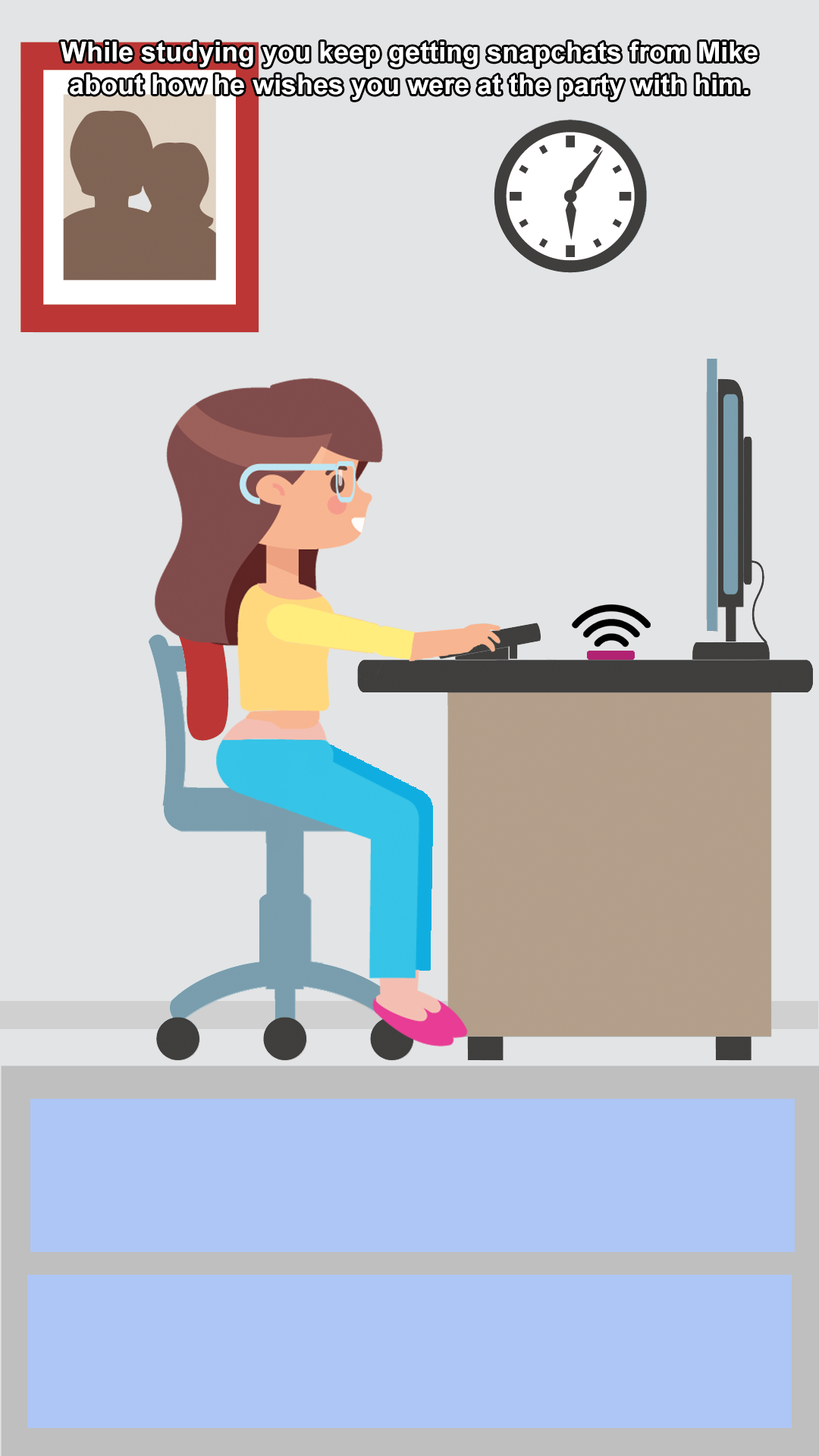
<style>
.page{position:relative;width:819px;height:1456px;background:#e3e4e5}
.page>*{position:absolute;margin:0}
.t1{font:27.3px "Arial-BoldMT";color:#ffffff}
</style>
<div class="page">
<p class="t1" style="left:61px;top:41px;width:697px;height:59px;text-align:center">While studying you keep getting snapchats from Mike about how he wishes you were at the party with him.</p>
</div>
